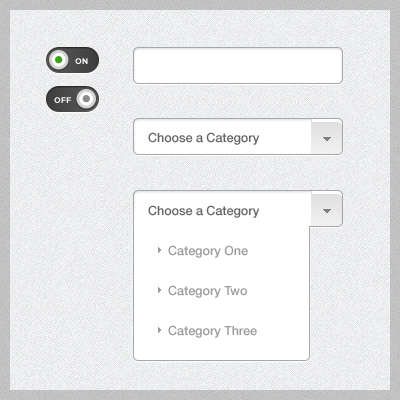
<style>
.page{position:relative;width:400px;height:400px;background:#ffffff}
.page>*{position:absolute;margin:0}
.t1{font:8px "Gotham-Bold";color:#ffffff}
.t2{font:12.5px "HelveticaNeueLTStd-Md";color:#656565}
.t3{font:12.5px "HelveticaNeueLTStd-Md";color:#9b9b9b}
</style>
<div class="page">
<p class="t1" style="left:75px;top:58px;width:13px;height:6px">ON</p>
<p class="t1" style="left:54px;top:97px;width:17px;height:6px">OFF</p>
<p class="t2" style="left:148px;top:132px;width:112px;height:13px">Choose a Category</p>
<p class="t2" style="left:148px;top:205px;width:112px;height:13px">Choose a Category</p>
<p class="t3" style="left:168px;top:245px;width:80px;height:13px">Category One</p>
<p class="t3" style="left:168px;top:285px;width:79px;height:13px">Category Two</p>
<p class="t3" style="left:168px;top:325px;width:89px;height:13px">Category Three</p>
</div>
